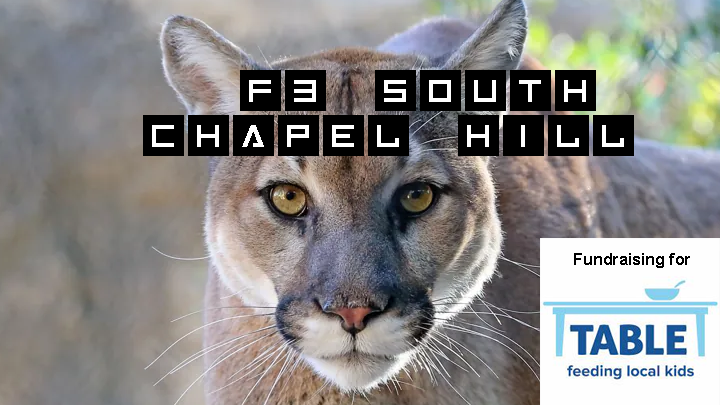
<style>
.page{position:relative;width:720px;height:405px}
.page>*{position:absolute;margin:0}
.t1{font:72px "Inversionz";color:#000000}
.t2{font:16px "Arial-BoldMT";color:#000000}
</style>
<div class="page">
<p class="t1" style="left:240px;top:70px;width:356px;height:41px">f3 south chapel hill</p>
<p class="t1" style="left:143px;top:115px;width:491px;height:41px">chapel hill</p>
<p class="t2" style="left:574px;top:253px;width:116px;height:15px">Fundraising for</p>
</div>
